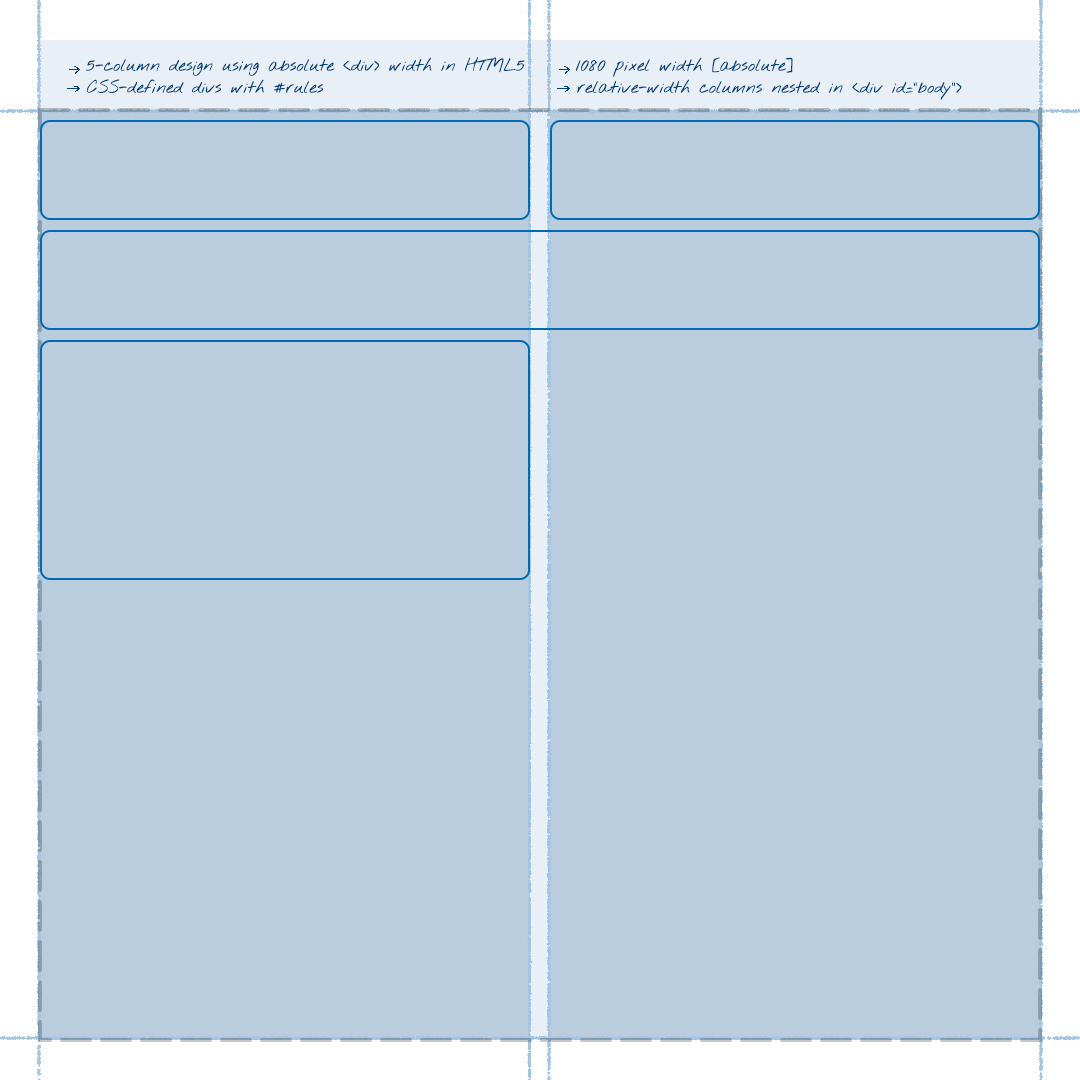
<style>
.page{position:relative;width:1080px;height:1080px;background:#bacddf}
.page>*{position:absolute;margin:0}
.t1{font:14px "NothingYouCouldDo";color:#004580}
</style>
<div class="page">
<p class="t1" style="left:86px;top:57px;width:439px;height:19px">5-column design using absolute &lt;div&gt; width in HTML5</p>
<p class="t1" style="left:576px;top:57px;width:217px;height:20px">1080 pixel width [absolute]</p>
<p class="t1" style="left:86px;top:79px;width:238px;height:14px">CSS-defined divs with #rules</p>
<p class="t1" style="left:577px;top:79px;width:385px;height:21px">relative-width columns nested in &lt;div id=”body”&gt;</p>
</div>
